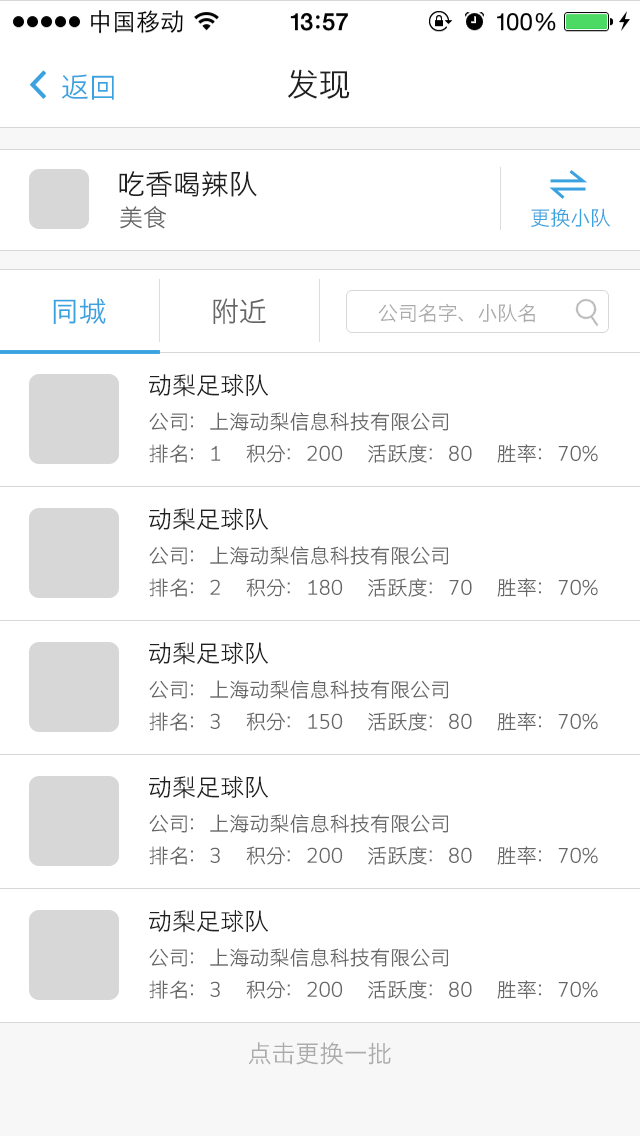
<style>
.page{position:relative;width:640px;height:1136px;background:#ffffff}
.page>*{position:absolute;margin:0}
.t1{font:28px "STHeitiSC-Light";color:#3ba2e0}
.t2{font:32px "STHeitiSC-Light";color:#202020}
.t3{font:28px "STHeitiSC-Light";color:#202020}
.t4{font:24px "STHeitiSC-Light";color:#666666}
.t5{font:20.2px "STHeitiSC-Light";color:#3ba2e0}
.t6{font:28px "STHeitiSC-Light";color:#666666}
.t7{font:20px "STHeitiSC-Light";color:#ababab}
.t8{font:24px "STHeitiSC-Light";color:#202020}
.t9{font:20px "STHeitiSC-Light";color:#666666}
.t10{font:24px "STHeitiSC-Light";color:#ababab}
</style>
<div class="page">
<p class="t1" style="left:61px;top:74px;width:53px;height:26px">返回</p>
<p class="t2" style="left:288px;top:69px;width:62px;height:30px">发现</p>
<p class="t3" style="left:119px;top:171px;width:138px;height:26px">吃香喝辣队</p>
<p class="t4" style="left:120px;top:205px;width:46px;height:24px">美食</p>
<p class="t5" style="left:531px;top:208px;width:79px;height:19px">更换小队</p>
<p class="t1" style="left:53px;top:298px;width:53px;height:26px">同城</p>
<p class="t6" style="left:213px;top:298px;width:53px;height:26px">附近</p>
<p class="t7" style="left:378px;top:303px;width:157px;height:20px">公司名字、小队名</p>
<p class="t8" style="left:149px;top:374px;width:119px;height:23px">动梨足球队</p>
<p class="t9" style="left:149px;top:412px;width:299px;height:19px">公司：上海动梨信息科技有限公司</p>
<p class="t9" style="left:149px;top:444px;width:449px;height:19px">排名：1      积分：200      活跃度：80      胜率：70%</p>
<p class="t8" style="left:149px;top:508px;width:119px;height:23px">动梨足球队</p>
<p class="t9" style="left:149px;top:546px;width:299px;height:19px">公司：上海动梨信息科技有限公司</p>
<p class="t9" style="left:149px;top:578px;width:449px;height:19px">排名：2      积分：180      活跃度：70      胜率：70%</p>
<p class="t8" style="left:149px;top:642px;width:119px;height:23px">动梨足球队</p>
<p class="t9" style="left:149px;top:680px;width:299px;height:19px">公司：上海动梨信息科技有限公司</p>
<p class="t9" style="left:149px;top:712px;width:449px;height:19px">排名：3      积分：150      活跃度：80      胜率：70%</p>
<p class="t8" style="left:149px;top:776px;width:119px;height:23px">动梨足球队</p>
<p class="t9" style="left:149px;top:814px;width:299px;height:19px">公司：上海动梨信息科技有限公司</p>
<p class="t9" style="left:149px;top:846px;width:449px;height:19px">排名：3      积分：200      活跃度：80      胜率：70%</p>
<p class="t8" style="left:149px;top:910px;width:119px;height:23px">动梨足球队</p>
<p class="t9" style="left:149px;top:948px;width:299px;height:19px">公司：上海动梨信息科技有限公司</p>
<p class="t9" style="left:149px;top:980px;width:449px;height:19px">排名：3      积分：200      活跃度：80      胜率：70%</p>
<p class="t10" style="left:248px;top:1042px;width:143px;height:23px">点击更换一批</p>
</div>
